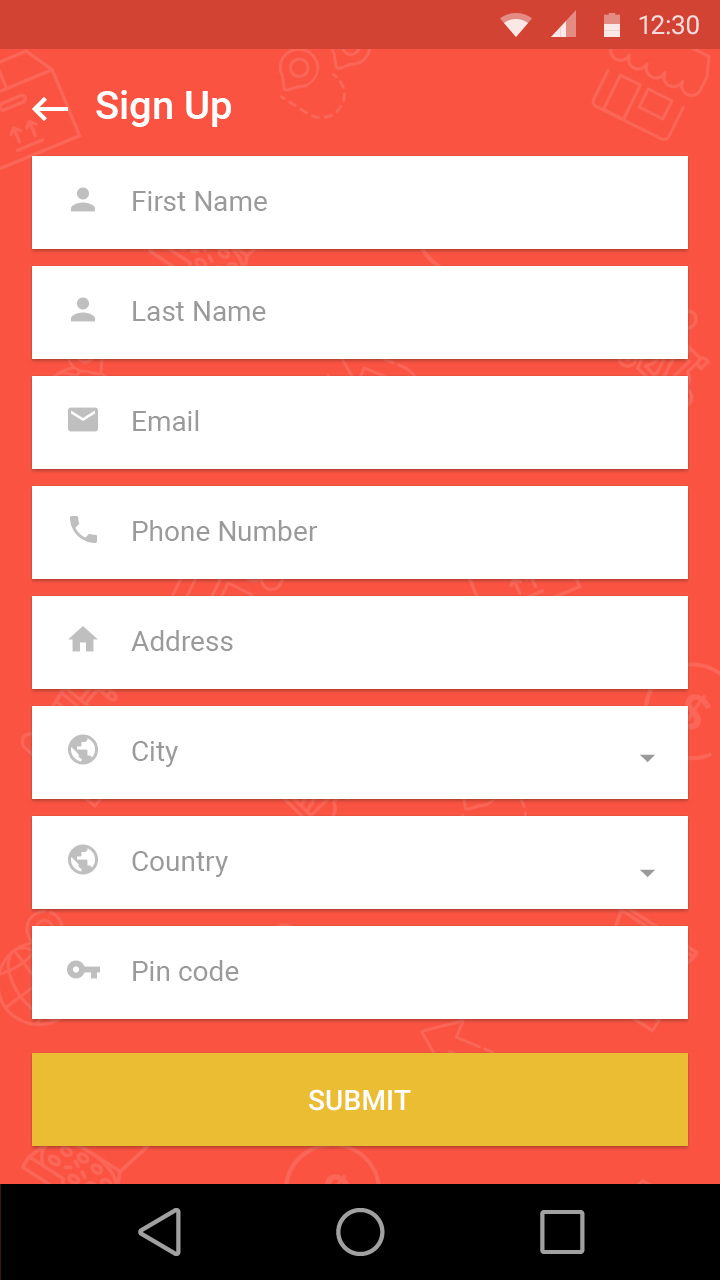
<style>
.page{position:relative;width:720px;height:1280px;background:#ffffff}
.page>*{position:absolute;margin:0}
.t1{font:26px "Roboto-Regular";color:#f5dcda}
.t2{font:40px "Roboto-Medium";color:#ffffff}
.t3{font:28px "Roboto-Regular";color:#9a9a9a}
.t4{font:28px "Roboto-Medium";letter-spacing:0.01em;color:#ffffff;text-transform:uppercase}
</style>
<div class="page">
<p class="t1" style="left:639px;top:15px;width:60px;height:20px">12:30</p>
<p class="t2" style="left:96px;top:90px;width:135px;height:37px">Sign Up</p>
<p class="t3" style="left:133px;top:191px;width:134px;height:20px">First Name</p>
<p class="t3" style="left:133px;top:301px;width:133px;height:20px">Last Name</p>
<p class="t3" style="left:133px;top:410px;width:66px;height:21px">Email</p>
<p class="t3" style="left:133px;top:520px;width:185px;height:21px">Phone Number</p>
<p class="t3" style="left:131px;top:630px;width:102px;height:21px">Address</p>
<p class="t3" style="left:132px;top:741px;width:46px;height:26px">City</p>
<p class="t3" style="left:132px;top:851px;width:96px;height:26px">Country</p>
<p class="t3" style="left:133px;top:960px;width:106px;height:21px">Pin code</p>
<p class="t4" style="left:309px;top:1089px;width:102px;height:22px">Submit</p>
</div>
